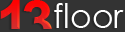
<style>
.page{position:relative;width:125px;height:32px;background:#333333}
.page>*{position:absolute;margin:0}
.t1{font:33px "CenturyGothic";color:#ffffff}
</style>
<div class="page">
<p class="t1" style="left:54px;top:3px;width:70px;height:25px">floor</p>
</div>
